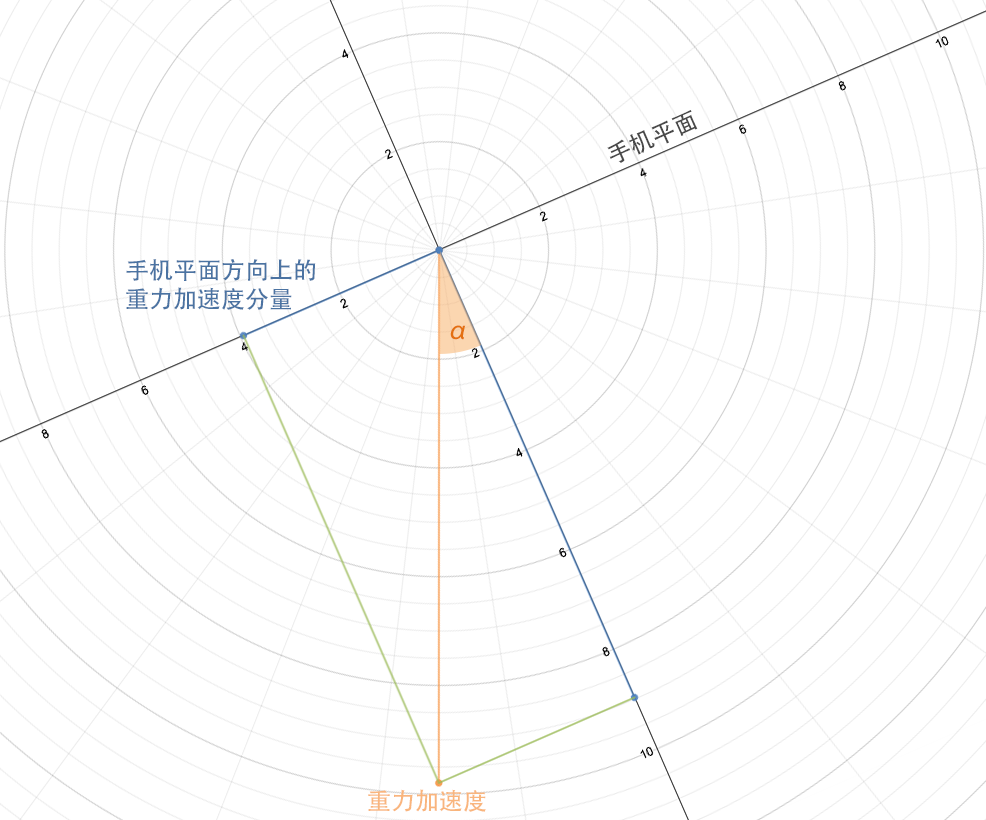
<style>
.page{position:relative;width:986px;height:820px;background:#ffffff}
.page>*{position:absolute;margin:0}
.t1{font:24px "AdobeHeitiStd-Regular";color:#494949}
.t2{font:24px "AdobeHeitiStd-Regular";color:#4b73a2}
.t3{font:24px "AdobeHeitiStd-Regular";color:#e47011}
.t4{font:24px "AdobeHeitiStd-Regular";color:#f9b57d}
</style>
<div class="page">
<p class="t1" style="left:607px;top:110px;width:91px;height:53px;rotate:-24deg">手机平面</p>
<p class="t2" style="left:126px;top:259px;width:190px;height:51px">手机平面方向上的<br>重力加速度分量</p>
<p class="t3" style="left:450px;top:325px;width:16px;height:15px">α</p>
<p class="t4" style="left:368px;top:789px;width:118px;height:23px">重力加速度</p>
</div>
